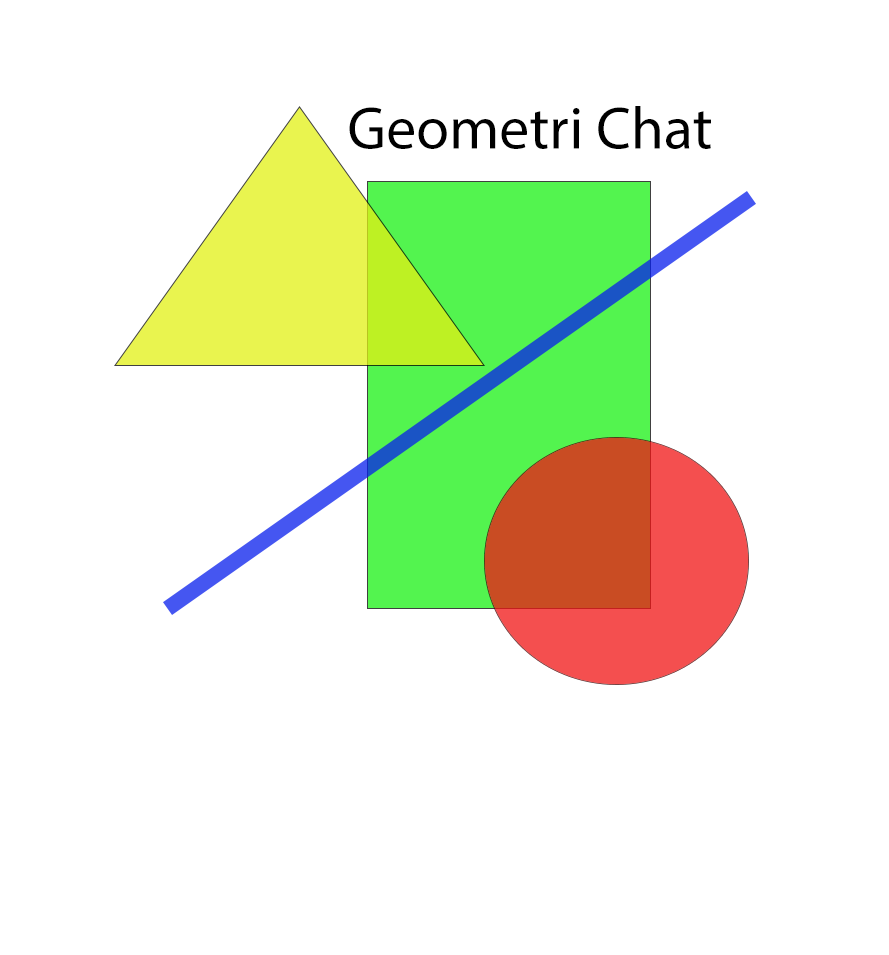
<style>
.page{position:relative;width:889px;height:955px;background:#ffffff}
.page>*{position:absolute;margin:0}
.t1{font:60px "MyriadPro-Regular";color:#000000}
</style>
<div class="page">
<p class="t1" style="left:349px;top:106px;width:362px;height:43px">Geometri Chat</p>
</div>
